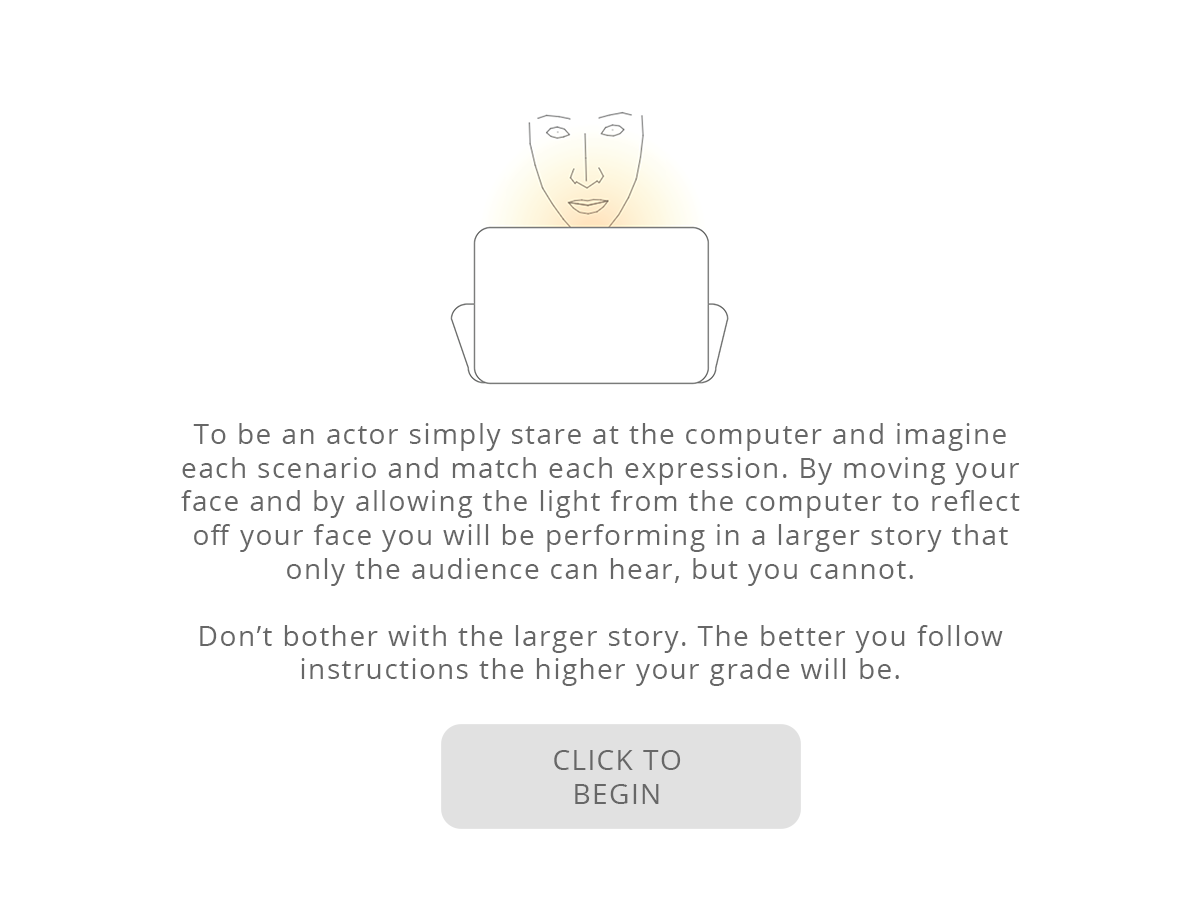
<style>
.page{position:relative;width:1200px;height:900px;background:#ffffff}
.page>*{position:absolute;margin:0}
.t1{font:28px "OpenSans";letter-spacing:0.05em;color:#676767}
</style>
<div class="page">
<p class="t1" style="left:181px;top:423px;width:839px;height:263px;text-align:center">To be an actor simply stare at the computer and imagine each scenario and match each expression. By moving your face and by allowing the light from the computer to reflect off your face you will be performing in a larger story that only the audience can hear, but you cannot. <br><br>Don’t bother with the larger story. The better you follow instructions the higher your grade will be.</p>
<p class="t1" style="left:554px;top:750px;width:127px;height:54px;text-align:center">CLICK TO BEGIN</p>
</div>
